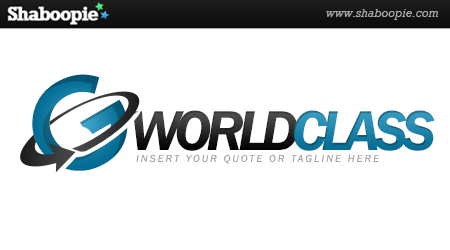
<style>
.page{position:relative;width:450px;height:250px;background:#ffffff}
.page>*{position:absolute;margin:0}
.t1{font:125px "CenturyGothic-Bold";text-transform:uppercase}
.t2{font:58.3px "FranklinGothic-DemiItalic";letter-spacing:-0.1em}
.t3{font:10.4px "FranklinGothic-BookItalic";letter-spacing:0.2em;color:#a3a3a3;text-transform:uppercase}
</style>
<div class="page">
<p class="t1" style="left:32px;top:74px;width:96px;height:97px;rotate:-30deg">G</p>
<p class="t2" style="left:133px;top:110px;width:165px;height:41px">WORLD</p>
<p class="t2" style="left:293px;top:110px;width:142px;height:41px">CLASS</p>
<p class="t3" style="left:136px;top:154px;width:244px;height:10px">INSERT YOUR QUOTE OR TAGLINE HERE</p>
</div>
